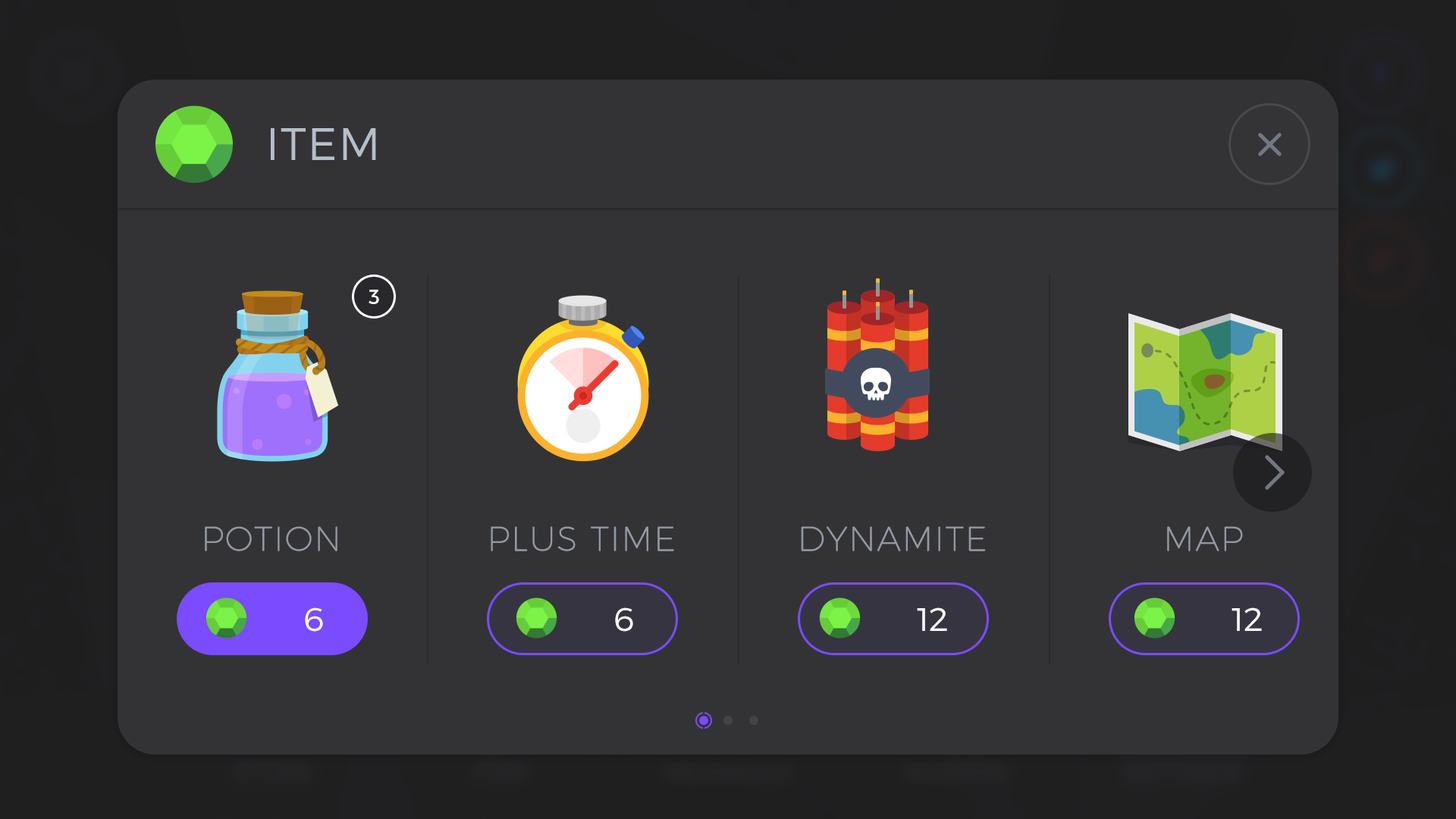
<style>
.page{position:relative;width:1456px;height:819px;background:#333336}
.page>*{position:absolute;margin:0}
.t1{font:45.5px "Montserrat-Light";letter-spacing:0.03em;color:#b6bfc9;text-transform:uppercase}
.t2{font:20.5px "Montserrat-Regular";letter-spacing:0.04em;color:#ffffff}
.t3{font:33.4px "Montserrat-Hairline";letter-spacing:0.03em;color:#9399a3;text-transform:uppercase;font-weight:bold}
.t4{font:32.4px "Montserrat-Light";letter-spacing:-0.025em;color:#ffffff;text-transform:uppercase;scale:1.05 1}
</style>
<div class="page">
<p class="t1" style="left:271px;top:128px;width:105px;height:32px">ITEM</p>
<p class="t2" style="left:369px;top:290px;width:10px;height:14px">3</p>
<p class="t3" style="left:205px;top:526px;width:132px;height:25px">POTION</p>
<p class="t3" style="left:491px;top:526px;width:183px;height:25px">Plus Time</p>
<p class="t3" style="left:801px;top:526px;width:185px;height:25px">dynamite</p>
<p class="t3" style="left:1167px;top:526px;width:76px;height:25px">map</p>
<p class="t4" style="left:305px;top:607px;width:18px;height:25px">6</p>
<p class="t4" style="left:615px;top:607px;width:18px;height:25px">6</p>
<p class="t4" style="left:917px;top:607px;width:30px;height:24px">12</p>
<p class="t4" style="left:1232px;top:607px;width:30px;height:24px">12</p>
</div>
